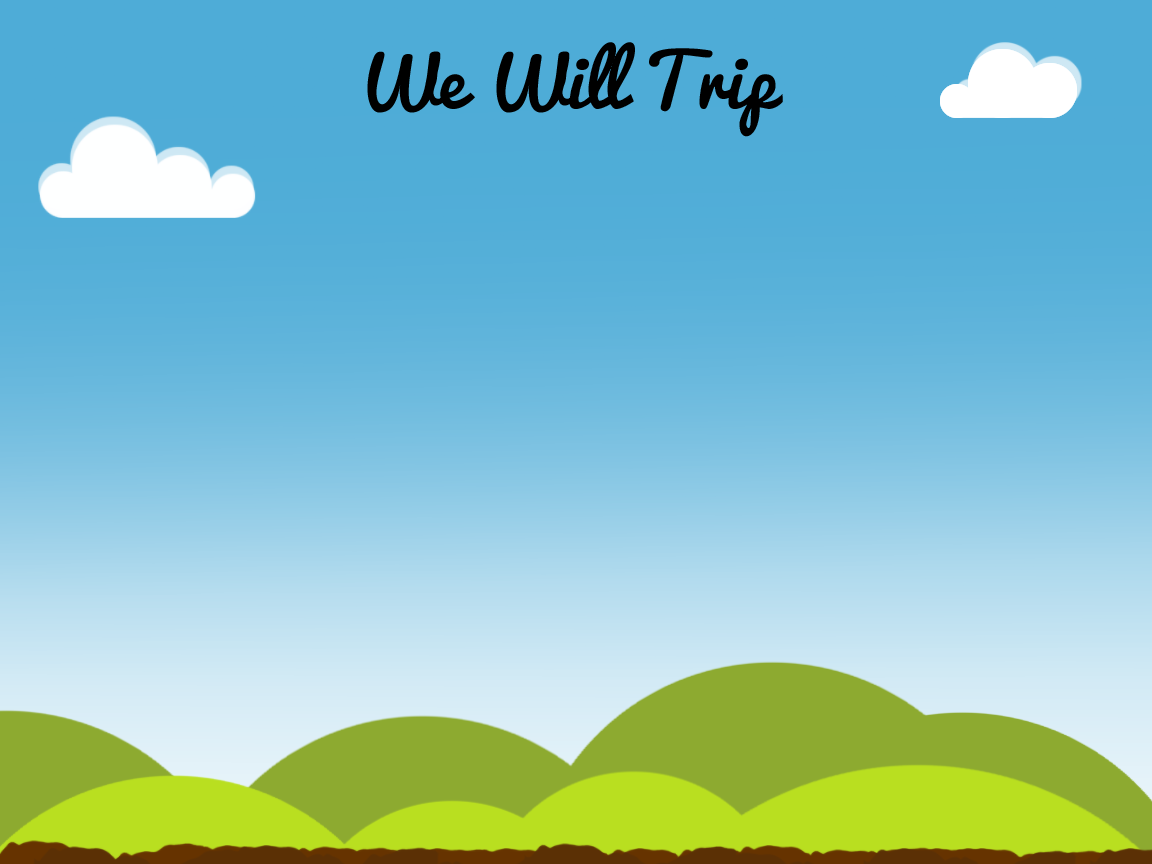
<style>
.page{position:relative;width:1152px;height:864px}
.page>*{position:absolute;margin:0}
.t1{font:72px "Pacifico";color:#000000}
</style>
<div class="page">
<p class="t1" style="left:367px;top:42px;width:416px;height:95px">We Will Trip</p>
</div>
